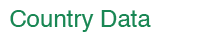
<style>
.page{position:relative;width:200px;height:40px;background:#ffffff}
.page>*{position:absolute;margin:0}
.t1{font:24px "Helvetica";color:#198754}
</style>
<div class="page">
<p class="t1" style="left:10px;top:10px;width:141px;height:22px">Country Data</p>
</div>
